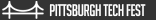
<style>
.page{position:relative;width:156px;height:20px;background:#333333}
.page>*{position:absolute;margin:0}
.t1{font:16.2px "BigNoodleTitling";letter-spacing:-0.025em;color:#ffffff;text-transform:uppercase}
</style>
<div class="page">
<p class="t1" style="left:49px;top:4px;width:97px;height:13px">Pittsburgh tech Fest</p>
</div>
